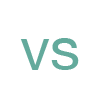
<style>
.page{position:relative;width:100px;height:100px;background:#ffffff}
.page>*{position:absolute;margin:0}
.t1{font:60px "HelveticaNeue";color:#63aa9c}
</style>
<div class="page">
<p class="t1" style="left:20px;top:38px;width:59px;height:32px">vs</p>
</div>
